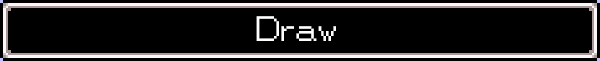
<style>
.page{position:relative;width:600px;height:61px;background:#000000}
.page>*{position:absolute;margin:0}
.t1{font:34.4px "PFStardust";color:#ffffff}
</style>
<div class="page">
<p class="t1" style="left:256px;top:16px;width:80px;height:25px">Draw</p>
</div>
